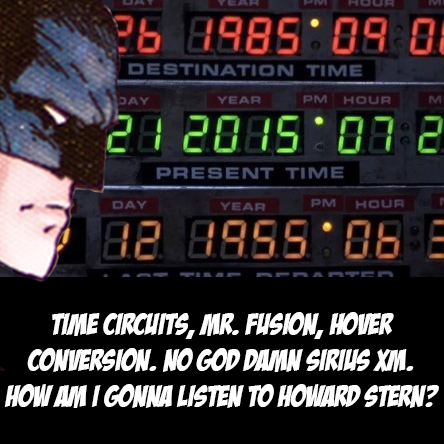
<style>
.page{position:relative;width:444px;height:444px;background:#000000}
.page>*{position:absolute;margin:0}
.t1{font:29.9px "BadaBoomBB";color:#ffffff}
</style>
<div class="page">
<p class="t1" style="left:4px;top:312px;width:435px;height:96px;text-align:center">Time circuits, Mr. Fusion, hover<br>conversion. No god damn Sirius XM.<br>How am I gonna listen to Howard Stern?</p>
</div>
